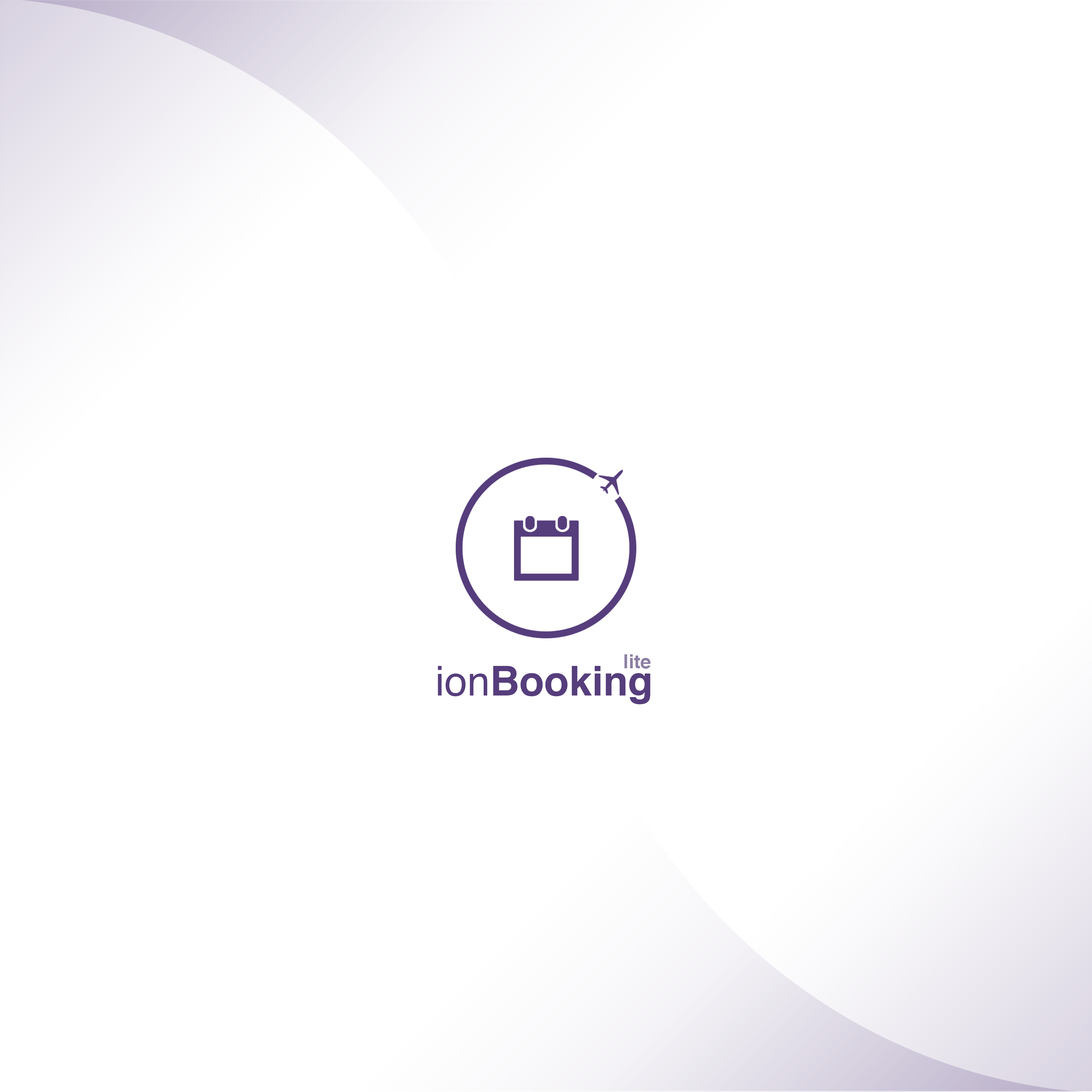
<style>
.page{position:relative;width:1092px;height:1092px;background:#ffffff}
.page>*{position:absolute;margin:0}
.t1{font:40.8px "Helvetica-Bold";color:#563d7c}
.t2{font:40.8px "Helvetica";color:#563d7c}
.t3{font:19.2px "Helvetica-Bold";color:#8c7fa3}
</style>
<div class="page">
<p class="t1" style="left:438px;top:666px;width:212px;height:38px"><span class="t2">ion</span>Booking</p>
<p class="t3" style="left:624px;top:654px;width:27px;height:15px">lite</p>
</div>
